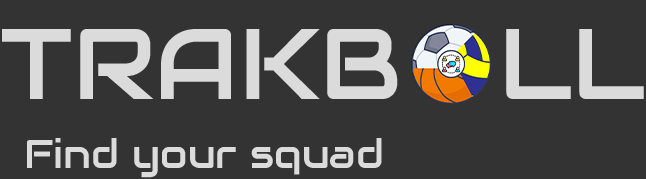
<style>
.page{position:relative;width:646px;height:179px;background:#333333}
.page>*{position:absolute;margin:0}
.t1{font:100px "Audiowide-Regular";color:#dbdbdb}
.t2{font:40px "Audiowide-Regular";color:#dbdbdb}
</style>
<div class="page">
<p class="t1" style="left:2px;top:29px;width:642px;height:70px">TRAKB   LL</p>
<p class="t2" style="left:27px;top:138px;width:355px;height:40px">Find your squad</p>
</div>
